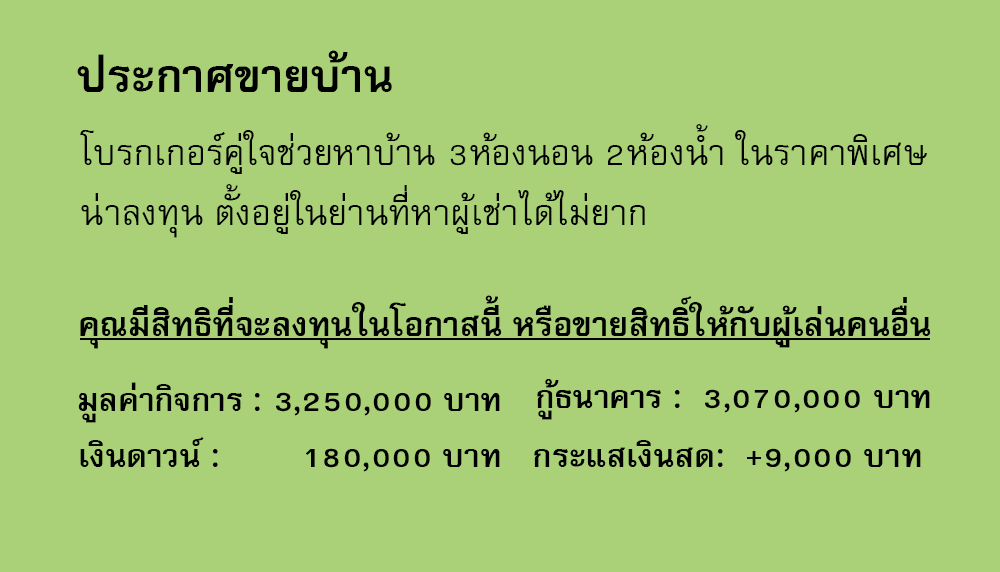
<style>
.page{position:relative;width:1000px;height:572px;background:#aad178}
.page>*{position:absolute;margin:0}
.t1{font:64px "FreesiaUPCBold";color:#000000}
.t2{font:50px/60px "FreesiaUPC";color:#000000}
.t3{font:47px "FreesiaUPCBold";color:#000000}
.t4{font:45px "FreesiaUPCBold";color:#000000}
</style>
<div class="page">
<p class="t1" style="left:77px;top:50px;width:315px;height:42px">ประกาศขายบ้าน</p>
<p class="t2" style="left:80px;top:124px;width:847px;height:114px">โบรกเกอร์คู่ใจช่วยหาบ้าน 3ห้องนอน 2ห้องน้ำ ในราคาพิเศษ<br>น่าลงทุน ตั้งอยู่ในย่านที่หาผู้เช่าได้ไม่ยาก</p>
<p class="t3" style="left:80px;top:295px;width:851px;height:54px">คุณมีสิทธิที่จะลงทุนในโอกาสนี้ หรือขายสิทธิ์ให้กับผู้เล่นคนอื่น</p>
<p class="t4" style="left:78px;top:382px;width:422px;height:41px">มูลค่ากิจการ : 3,250,000 บาท</p>
<p class="t4" style="left:537px;top:379px;width:393px;height:41px">กู้ธนาคาร :  3,070,000 บาท</p>
<p class="t4" style="left:80px;top:436px;width:420px;height:36px">เงินดาวน์ :        180,000 บาท</p>
<p class="t4" style="left:534px;top:440px;width:387px;height:32px">กระแสเงินสด:  +9,000 บาท</p>
</div>
